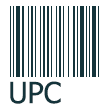
<style>
.page{position:relative;width:107px;height:107px;background:#ffffff}
.page>*{position:absolute;margin:0}
.t1{font:29.2px "Tahoma";color:#14343b}
</style>
<div class="page">
<p class="t1" style="left:10px;top:81px;width:51px;height:23px">UPC</p>
</div>
